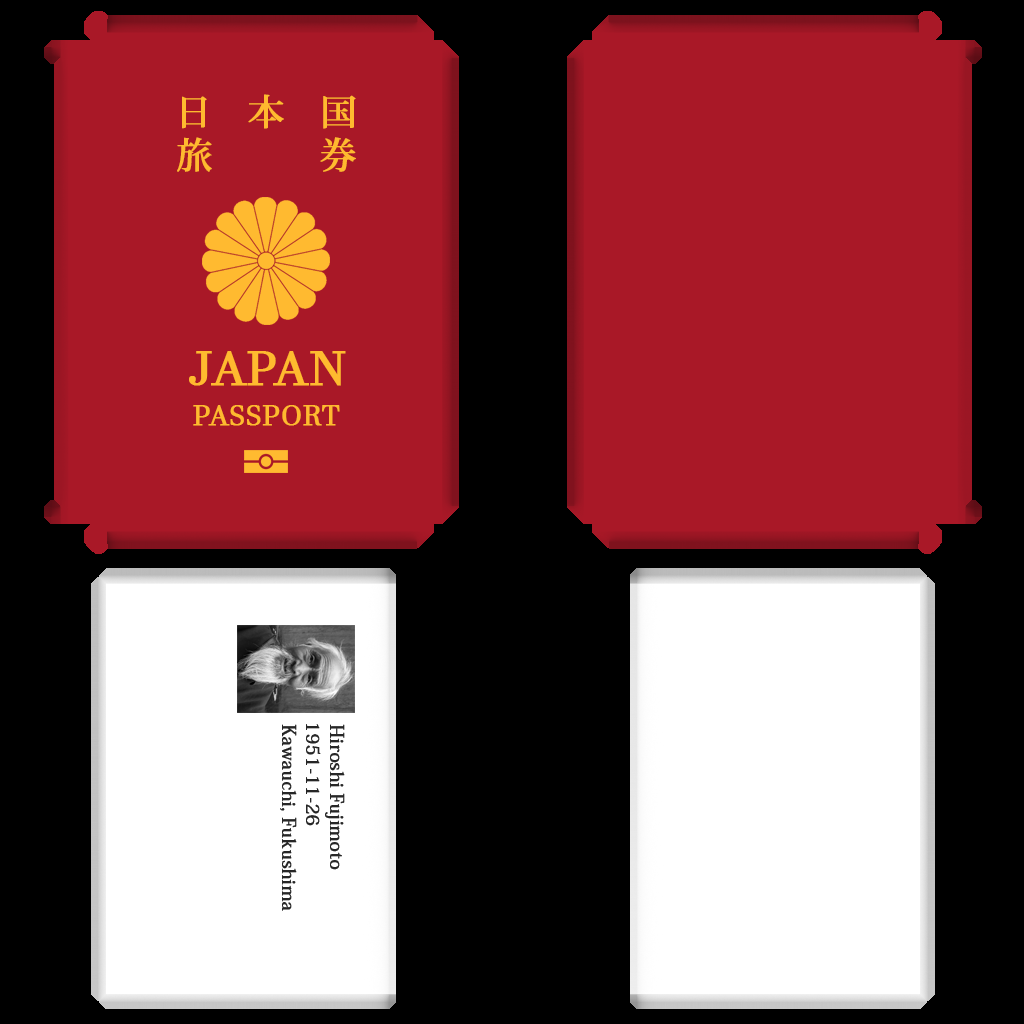
<style>
.page{position:relative;width:1024px;height:1024px;background:#a91827}
.page>*{position:absolute;margin:0}
.t1{font:36px "KozMinPro-Medium";color:#ffba2f;font-weight:bold}
.t2{font:48px "JavaneseText";color:#ffba2f;font-weight:bold}
.t3{font:28px "JavaneseText";color:#ffba2f;font-weight:bold}
.t4{font:18px "KozMinPro-Medium";color:#262626;font-weight:bold}
</style>
<div class="page">
<p class="t1" style="left:177px;top:94px;width:179px;height:78px">日  本 国<br>旅   券</p>
<p class="t2" style="left:189px;top:351px;width:157px;height:35px">JAPAN</p>
<p class="t3" style="left:193px;top:405px;width:147px;height:21px">PASSPORT</p>
<p class="t4" style="left:280px;top:724px;width:17px;height:187px;rotate:90deg">Kawauchi, Fukushima</p>
<p class="t4" style="left:306px;top:724px;width:15px;height:102px;rotate:90deg">1951-11-26</p>
<p class="t4" style="left:325px;top:724px;width:20px;height:146px;rotate:90deg">Hiroshi Fujimoto</p>
</div>
